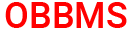
<style>
.page{position:relative;width:130px;height:30px;background:#ffffff}
.page>*{position:absolute;margin:0}
.t1{font:36px "Roboto-Medium";color:#ff0000}
</style>
<div class="page">
<p class="t1" style="left:5px;top:2px;width:122px;height:26px">OBBMS</p>
</div>
